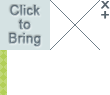
<style>
.page{position:relative;width:110px;height:95px;background:#ffffff}
.page>*{position:absolute;margin:0}
.t1{font:13.3px/14px "ArialMT";color:#6e7e89;font-weight:bold}
.t2{font:9.9px "ArialMT";color:#58646d;font-weight:bold;scale:1.22 1}
.t3{font:12.6px "ArialMT";color:#58646d;font-weight:bold;scale:1.22 1}
</style>
<div class="page">
<p class="t1" style="left:9px;top:5px;width:32px;height:42px;text-align:center">Click<br>to<br>Bring</p>
<p class="t2" style="left:101px;top:1px;width:9px;height:8px">X</p>
<p class="t3" style="left:101px;top:11px;width:8px;height:8px">+</p>
</div>
